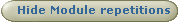
<style>
.page{position:relative;width:180px;height:22px}
.page>*{position:absolute;margin:0}
.t1{font:11px "Verdana-Bold";color:#336699}
</style>
<div class="page">
<p class="t1" style="left:18px;top:5px;width:152px;height:11px">Hide Module repetitions</p>
</div>
